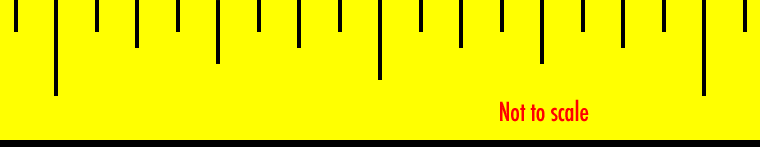
<style>
.page{position:relative;width:760px;height:147px;background:#ffff01}
.page>*{position:absolute;margin:0}
.t1{font:25.6px "Futura-CondensedMedium";letter-spacing:-0.01em;color:#ff0000}
</style>
<div class="page">
<p class="t1" style="left:500px;top:99px;width:89px;height:23px">Not to scale</p>
</div>
